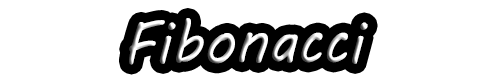
<style>
.page{position:relative;width:496px;height:82px;background:#ffffff}
.page>*{position:absolute;margin:0}
.t1{font:60px "MVBoli"}
</style>
<div class="page">
<p class="t1" style="left:129px;top:18px;width:239px;height:47px">Fibonacci</p>
</div>
